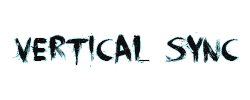
<style>
.page{position:relative;width:250px;height:100px;background:#ffffff}
.page>*{position:absolute;margin:0}
.t1{font:36px "FaceYourFears";color:#0e0e0e}
</style>
<div class="page">
<p class="t1" style="left:12px;top:32px;width:227px;height:35px">Vertical Sync</p>
</div>
